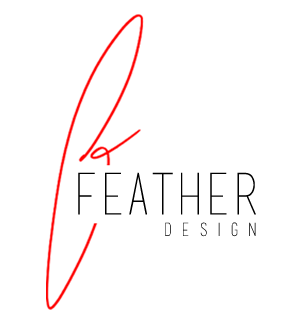
<style>
.page{position:relative;width:304px;height:326px;background:#ffffff}
.page>*{position:absolute;margin:0}
.t1{font:57px "basictitlefont";color:#000000}
.t2{font:18px "basictitlefont"}
</style>
<div class="page">
<p class="t1" style="left:78px;top:172px;width:178px;height:43px">FEather</p>
<p class="t2" style="left:165px;top:222px;width:91px;height:15px">D E S I G N</p>
</div>
